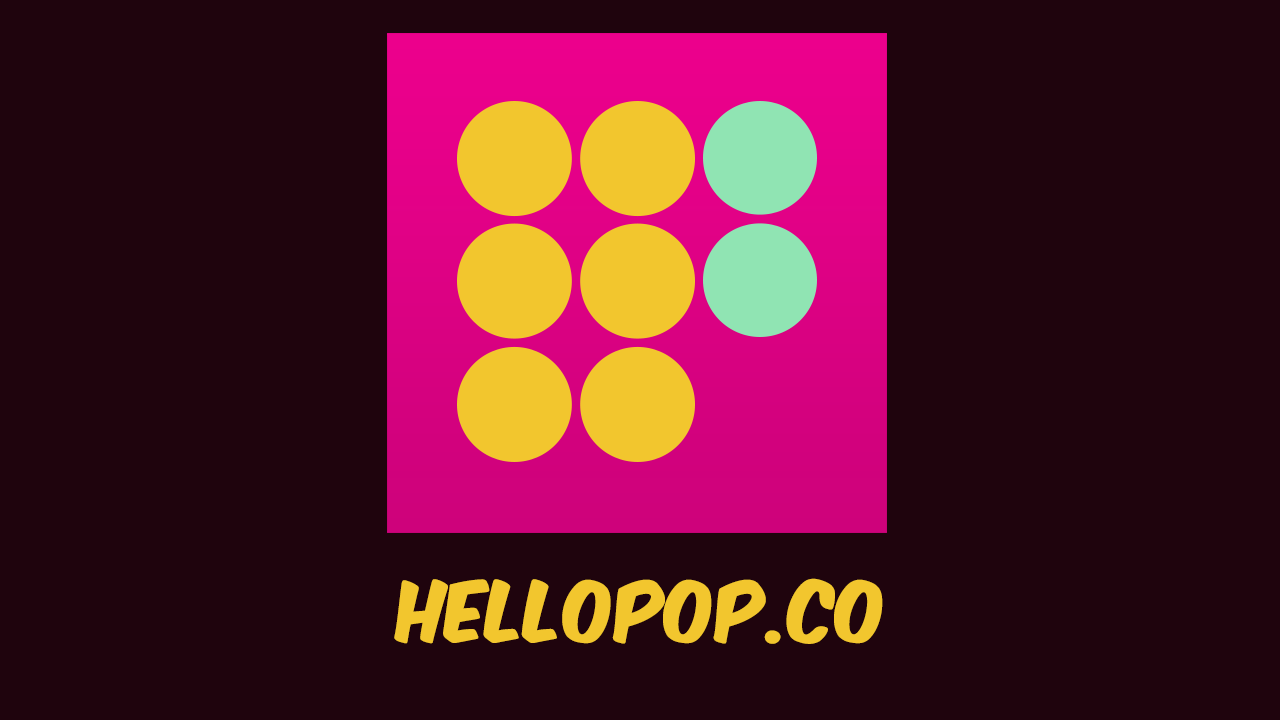
<style>
.page{position:relative;width:1280px;height:720px;background:#1f040d}
.page>*{position:absolute;margin:0}
.t1{font:72px "KomikaAxis";color:#f2c62e}
</style>
<div class="page">
<p class="t1" style="left:394px;top:578px;width:489px;height:66px">hellopop.co</p>
</div>
